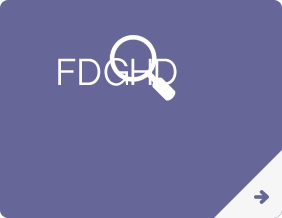
<style>
.page{position:relative;width:282px;height:218px;background:#666699}
.page>*{position:absolute;margin:0}
.t1{font:38px "MyanmarSangamMN";color:#fdfbfb;text-transform:uppercase}
</style>
<div class="page">
<p class="t1" style="left:58px;top:58px;width:119px;height:28px">fdghd</p>
</div>
